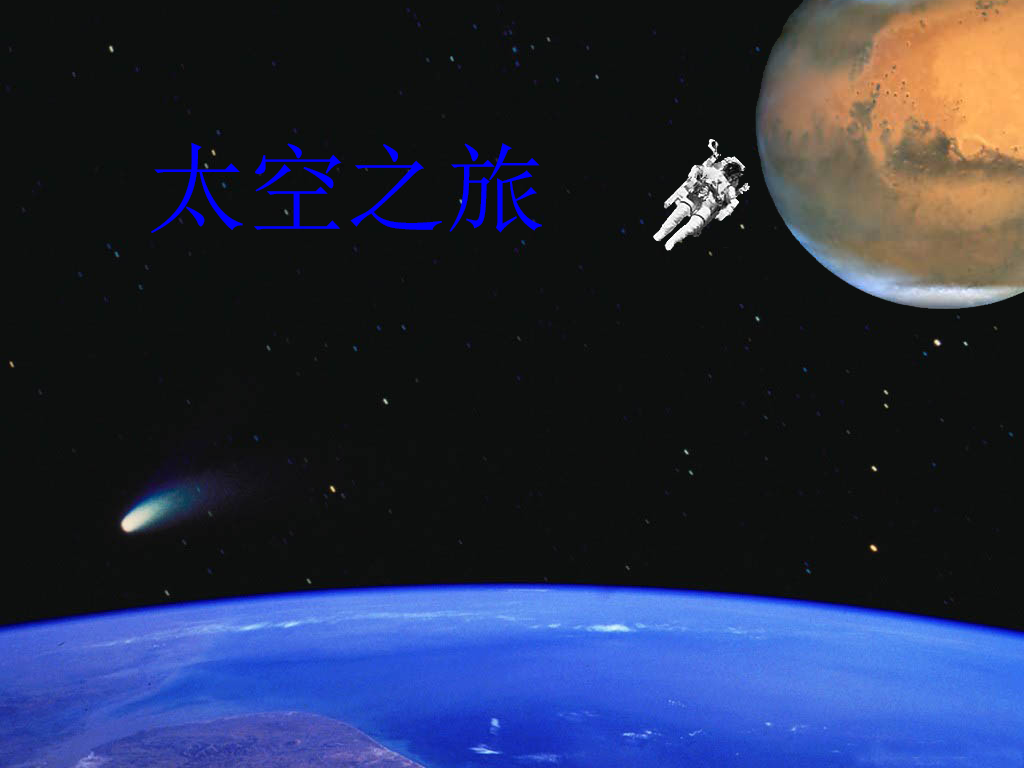
<style>
.page{position:relative;width:1024px;height:768px;background:#0d0f0e}
.page>*{position:absolute;margin:0}
.t1{font:99.6px "SimSun";color:#0000ff}
</style>
<div class="page">
<p class="t1" style="left:151px;top:142px;width:391px;height:91px">太空之旅</p>
</div>
